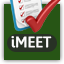
<style>
.page{position:relative;width:64px;height:64px;background:#275515}
.page>*{position:absolute;margin:0}
.t1{font:14.7px "Leelawadee";color:#fefefe;font-weight:bold}
</style>
<div class="page">
<p class="t1" style="left:11px;top:36px;width:41px;height:12px">iMEET</p>
</div>
